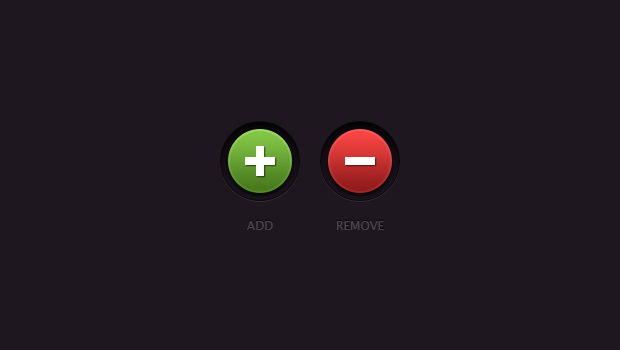
<style>
.page{position:relative;width:620px;height:350px;background:#1f1720}
.page>*{position:absolute;margin:0}
.t1{font:12px "LucidaSansUnicode";color:#4c424d;text-transform:uppercase}
</style>
<div class="page">
<p class="t1" style="left:246px;top:221px;width:27px;height:9px">ADD</p>
<p class="t1" style="left:337px;top:221px;width:47px;height:9px">Remove</p>
</div>
